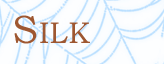
<style>
.page{position:relative;width:164px;height:64px}
.page>*{position:absolute;margin:0}
.t1{font:29.9px "BookmanOldStyle";letter-spacing:0.025em;color:#9e5731}
.t2{font:39.9px "BookmanOldStyle";letter-spacing:0.025em;color:#9e5731}
</style>
<div class="page">
<p class="t1" style="left:14px;top:15px;width:76px;height:29px"><span class="t2">S</span>ILK</p>
</div>
